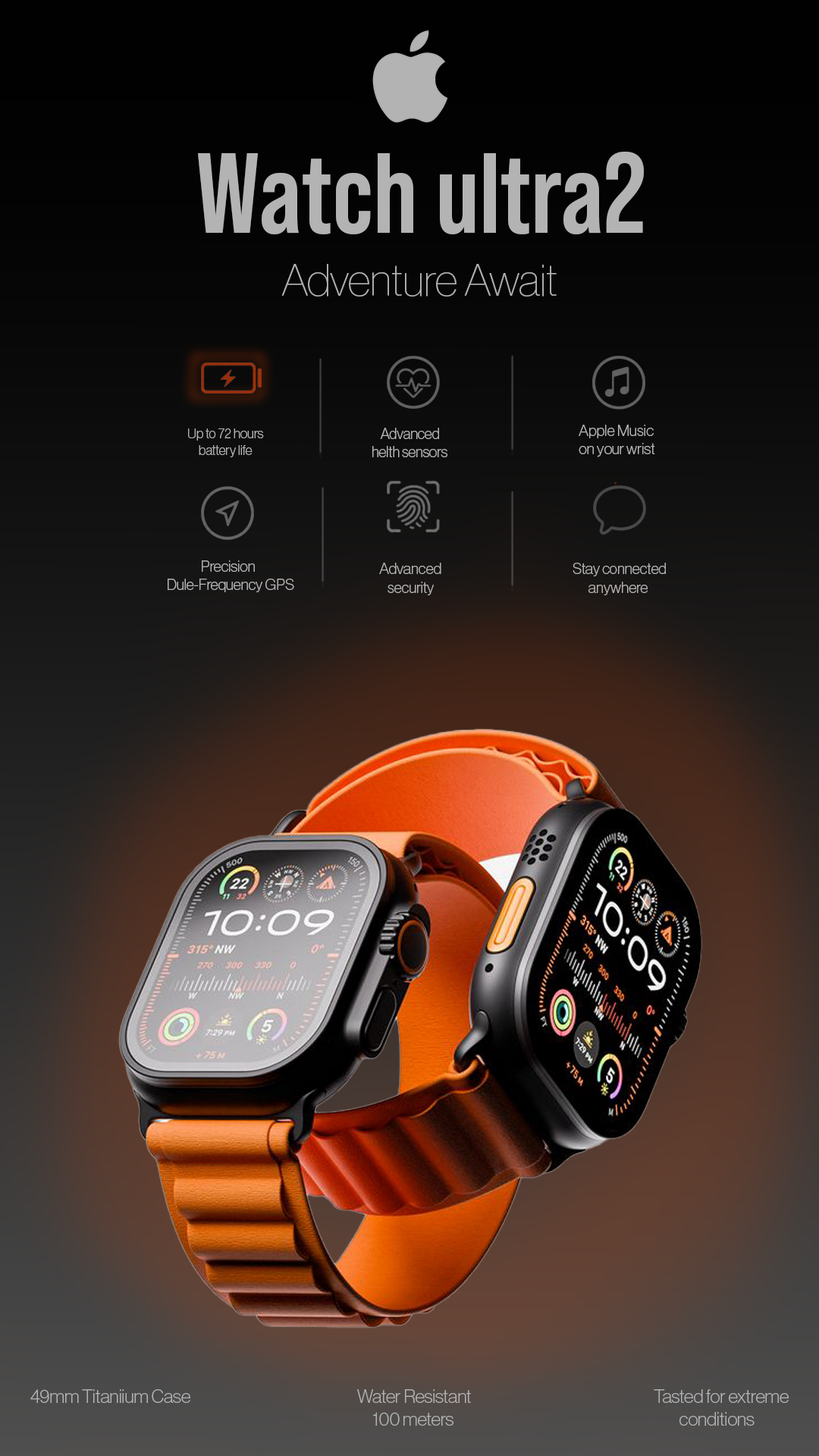
<style>
.page{position:relative;width:819px;height:1456px}
.page>*{position:absolute;margin:0}
.t1{font:113.7px "BebasNeuePro-Bold";letter-spacing:-0.002em;color:#b3b3b3}
.t2{font:44.2px "NHaasGroteskDSPro-25Th";letter-spacing:-0.002em;color:#b3b3b3}
.t3{font:15.7px "NHaasGroteskDSPro-35XLt";letter-spacing:-0.002em;color:#b3b3b3}
.t4{font:13.8px "NHaasGroteskDSPro-35XLt";letter-spacing:-0.002em;color:#b3b3b3}
.t5{font:14.9px "NHaasGroteskDSPro-35XLt";letter-spacing:-0.002em;color:#b3b3b3}
.t6{font:15.5px "NHaasGroteskDSPro-35XLt";letter-spacing:-0.002em;color:#b3b3b3}
.t7{font:19px "NHaasGroteskDSPro-35XLt";letter-spacing:-0.002em;color:#b3b3b3}
</style>
<div class="page">
<p class="t1" style="left:198px;top:152px;width:446px;height:83px">Watch ultra2</p>
<p class="t2" style="left:281px;top:264px;width:276px;height:33px">Adventure Await</p>
<p class="t3" style="left:579px;top:425px;width:76px;height:32px">Apple Music<br>on your wrist</p>
<p class="t4" style="left:188px;top:428px;width:76px;height:29px">Up to 72 hours<br>     battery life</p>
<p class="t5" style="left:372px;top:428px;width:75px;height:29px">Advanced<br>helth sensors</p>
<p class="t6" style="left:168px;top:560px;width:126px;height:32px">Precision<br>Dule-Frequency GPS</p>
<p class="t6" style="left:379px;top:563px;width:62px;height:32px">Advanced<br>security</p>
<p class="t6" style="left:573px;top:563px;width:93px;height:32px">Stay connected<br>anywhere</p>
<p class="t7" style="left:30px;top:1389px;width:160px;height:14px">49mm Titaniium Case</p>
<p class="t7" style="left:357px;top:1389px;width:114px;height:37px">Water Resistant<br>100 meters</p>
<p class="t7" style="left:654px;top:1389px;width:135px;height:37px">Tasted for extreme<br>conditions</p>
</div>
